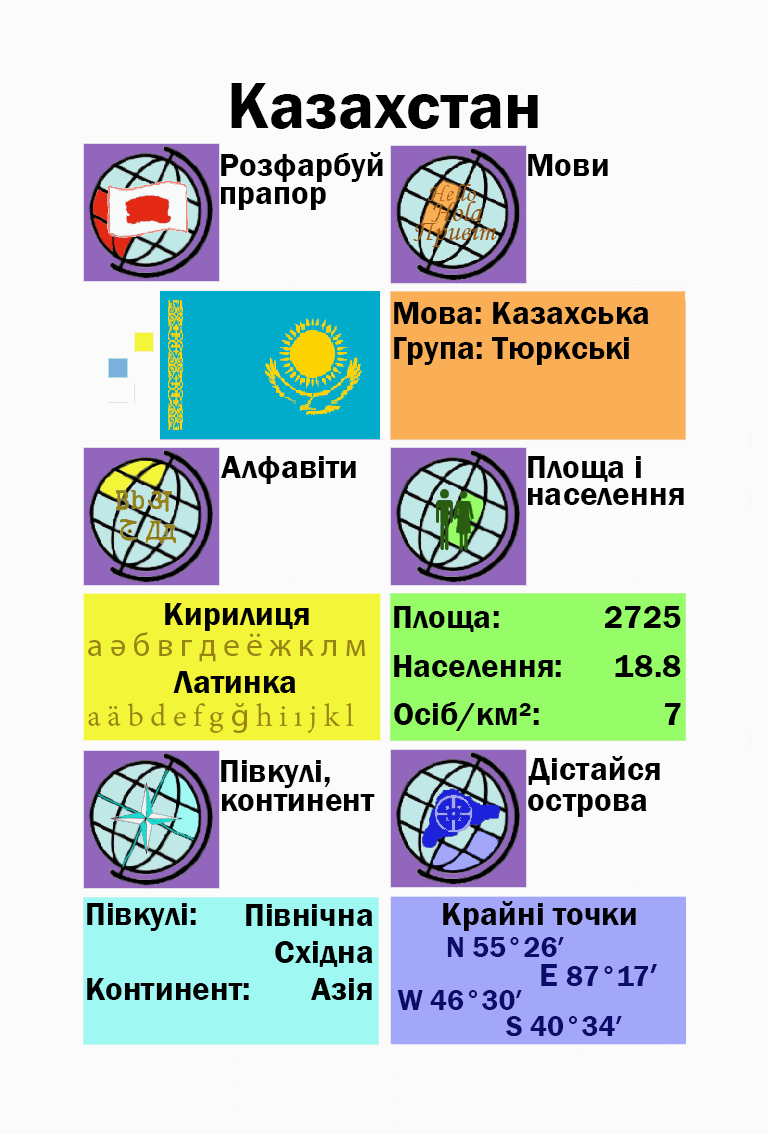
<style>
.page{position:relative;width:768px;height:1134px;background:#fbfbfb}
.page>*{position:absolute;margin:0}
.t1{font:66.7px "FranklinGothic-Demi";color:#000000}
.t2{font:33.3px "FranklinGothic-Demi";color:#000000}
.t3{font:33.3px "FranklinGothic-Demi";color:#000003}
.t4{font:33.3px "MyriadPro-Regular";color:#988413}
.t5{font:29.2px "FranklinGothic-Demi";color:#988413}
.t6{font:33.3px "AdobeDevanagari-Regular";color:#988413}
.t7{font:29.2px "FranklinGothic-Demi";color:#090c69}
.t8{font:33.3px "FranklinGothic-Demi";color:#090c69}
</style>
<div class="page">
<p class="t1" style="left:231px;top:83px;width:307px;height:46px">Казахстан</p>
<p class="t2" style="left:221px;top:152px;width:162px;height:30px">Розфарбуй</p>
<p class="t2" style="left:528px;top:154px;width:80px;height:22px">Мови</p>
<p class="t2" style="left:221px;top:187px;width:105px;height:23px">прапор</p>
<p class="t2" style="left:394px;top:302px;width:255px;height:22px">Мова: Казахська</p>
<p class="t2" style="left:394px;top:337px;width:235px;height:28px">Група: Тюркські</p>
<p class="t2" style="left:221px;top:456px;width:135px;height:28px">Алфавіти</p>
<p class="t2" style="left:528px;top:456px;width:113px;height:26px">Площа і</p>
<p class="t2" style="left:528px;top:488px;width:156px;height:17px">населення</p>
<p class="t2" style="left:165px;top:603px;width:144px;height:28px">Кирилиця</p>
<p class="t2" style="left:394px;top:606px;width:105px;height:26px">Площа:</p>
<p class="t3" style="left:605px;top:606px;width:76px;height:22px">2725</p>
<p class="t4" style="left:88px;top:632px;width:277px;height:30px"><span class="t5"><br></span>а ә б в г д е ё ж к л м</p>
<p class="t2" style="left:394px;top:655px;width:167px;height:22px">Населення:</p>
<p class="t2" style="left:615px;top:655px;width:66px;height:22px">18.8</p>
<p class="t2" style="left:173px;top:671px;width:123px;height:22px">Латинка</p>
<p class="t2" style="left:394px;top:702px;width:145px;height:29px">Осіб/км²:</p>
<p class="t6" style="left:88px;top:703px;width:266px;height:30px">a ä b d e f g <span class="t4">ğ</span> h i ı j k l</p>
<p class="t2" style="left:664px;top:703px;width:17px;height:22px">7</p>
<p class="t2" style="left:221px;top:760px;width:109px;height:28px">Півкулі,</p>
<p class="t2" style="left:528px;top:756px;width:132px;height:29px">Дістайся</p>
<p class="t2" style="left:222px;top:794px;width:153px;height:17px">континент</p>
<p class="t2" style="left:528px;top:794px;width:119px;height:23px">острова</p>
<p class="t2" style="left:87px;top:903px;width:109px;height:28px">Півкулі:</p>
<p class="t2" style="left:246px;top:904px;width:127px;height:22px">Північна</p>
<p class="t3" style="left:443px;top:901px;width:193px;height:30px">Крайні точки</p>
<p class="t2" style="left:275px;top:941px;width:98px;height:26px">Східна</p>
<p class="t7" style="left:447px;top:937px;width:117px;height:20px">N 55°26′</p>
<p class="t7" style="left:541px;top:964px;width:116px;height:22px"><span class="t8">E </span>87°17<span class="t8">′</span></p>
<p class="t2" style="left:87px;top:978px;width:162px;height:22px">Континент:</p>
<p class="t2" style="left:311px;top:978px;width:61px;height:22px">Азія</p>
<p class="t7" style="left:397px;top:990px;width:125px;height:20px">W 46°30′</p>
<p class="t7" style="left:506px;top:1016px;width:116px;height:21px">S 40°34′</p>
</div>
